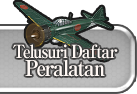
<style>
.page{position:relative;width:137px;height:94px}
.page>*{position:absolute;margin:0}
.t1{font:18px/18px "RyuminPro-ExBold";letter-spacing:-0.08em;color:#fff8f4;scale:0.9 1}
.t2{font:22px/18px "RyuminPro-ExBold";letter-spacing:-0.08em;color:#fff8f4;scale:0.9 1}
</style>
<div class="page">
<p class="t1" style="left:13px;top:44px;width:105px;height:33px;text-align:center">Telusuri Daftar<br><span class="t2">Peralatan</span></p>
</div>
